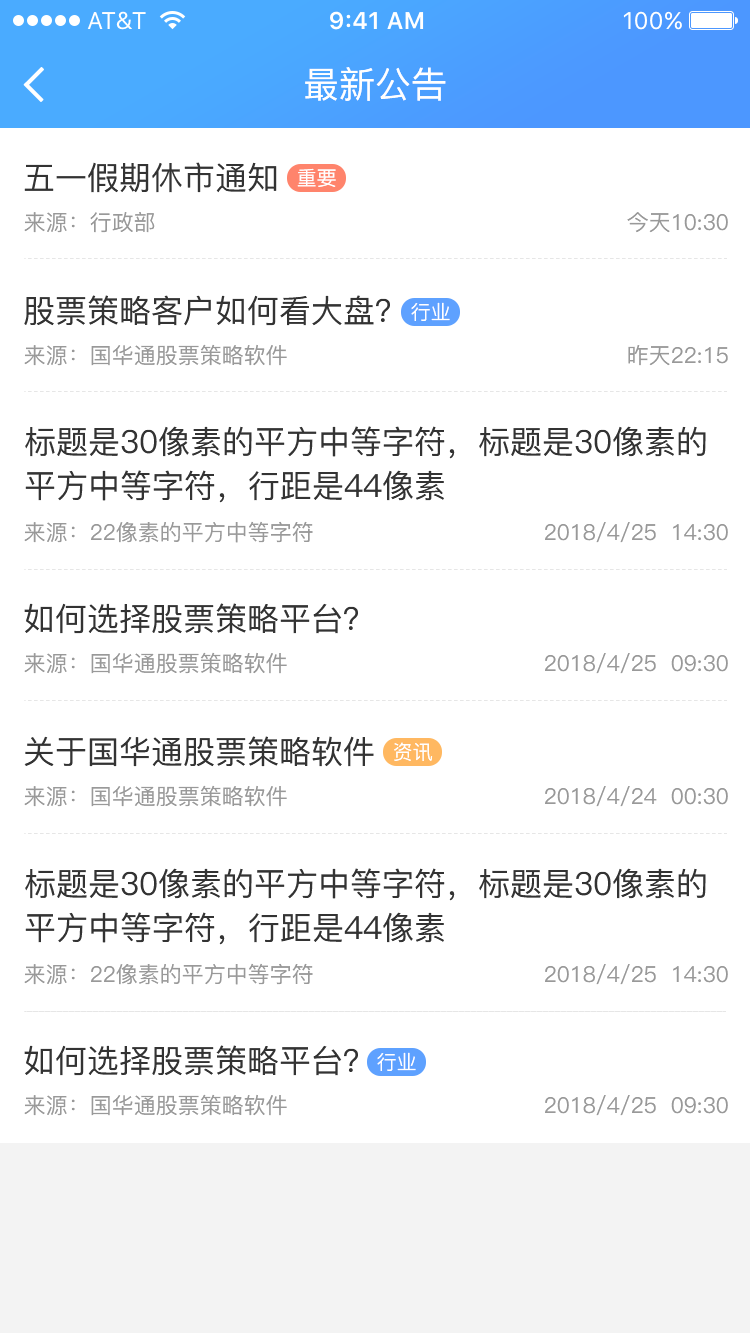
<style>
.page{position:relative;width:750px;height:1333px;background:#ffffff}
.page>*{position:absolute;margin:0}
.t1{font:36px "PingFang-SC-Medium";color:#ffffff}
.t2{font:32px "PingFang-SC-Medium";color:#333333}
.t3{font:20px "PingFang-SC-Medium";color:#ffffff}
.t4{font:22px "PingFang-SC-Medium";color:#999999}
.t5{font:32px/44px "PingFang-SC-Medium";color:#333333}
</style>
<div class="page">
<p class="t1" style="left:305px;top:67px;width:141px;height:34px">最新公告</p>
<p class="t2" style="left:24px;top:162px;width:253px;height:31px">五一假期休市通知</p>
<p class="t3" style="left:297px;top:168px;width:39px;height:19px">重要</p>
<p class="t4" style="left:24px;top:212px;width:131px;height:21px">来源：行政部</p>
<p class="t4" style="left:627px;top:212px;width:101px;height:21px">今天10:30</p>
<p class="t2" style="left:24px;top:295px;width:366px;height:31px">股票策略客户如何看大盘？</p>
<p class="t3" style="left:411px;top:302px;width:39px;height:19px">行业</p>
<p class="t4" style="left:24px;top:344px;width:263px;height:22px">来源：国华通股票策略软件</p>
<p class="t4" style="left:628px;top:345px;width:100px;height:21px">昨天22:15</p>
<p class="t5" style="left:25px;top:426px;width:681px;height:77px">标题是30像素的平方中等字符，标题是30像素的<br>平方中等字符，行距是44像素</p>
<p class="t4" style="left:24px;top:521px;width:289px;height:22px">来源：22像素的平方中等字符</p>
<p class="t4" style="left:545px;top:522px;width:183px;height:21px">2018/4/25  14:30</p>
<p class="t2" style="left:24px;top:603px;width:334px;height:31px">如何选择股票策略平台？</p>
<p class="t4" style="left:24px;top:652px;width:263px;height:22px">来源：国华通股票策略软件</p>
<p class="t4" style="left:545px;top:653px;width:183px;height:21px">2018/4/25  09:30</p>
<p class="t2" style="left:24px;top:736px;width:350px;height:31px">关于国华通股票策略软件</p>
<p class="t3" style="left:394px;top:742px;width:39px;height:19px">资讯</p>
<p class="t4" style="left:24px;top:785px;width:263px;height:22px">来源：国华通股票策略软件</p>
<p class="t4" style="left:545px;top:786px;width:183px;height:21px">2018/4/24  00:30</p>
<p class="t5" style="left:25px;top:868px;width:681px;height:77px">标题是30像素的平方中等字符，标题是30像素的<br>平方中等字符，行距是44像素</p>
<p class="t4" style="left:24px;top:963px;width:289px;height:22px">来源：22像素的平方中等字符</p>
<p class="t4" style="left:545px;top:964px;width:183px;height:21px">2018/4/25  14:30</p>
<p class="t2" style="left:24px;top:1045px;width:334px;height:31px">如何选择股票策略平台？</p>
<p class="t3" style="left:377px;top:1052px;width:39px;height:19px">行业</p>
<p class="t4" style="left:24px;top:1094px;width:263px;height:22px">来源：国华通股票策略软件</p>
<p class="t4" style="left:545px;top:1095px;width:183px;height:21px">2018/4/25  09:30</p>
</div>
